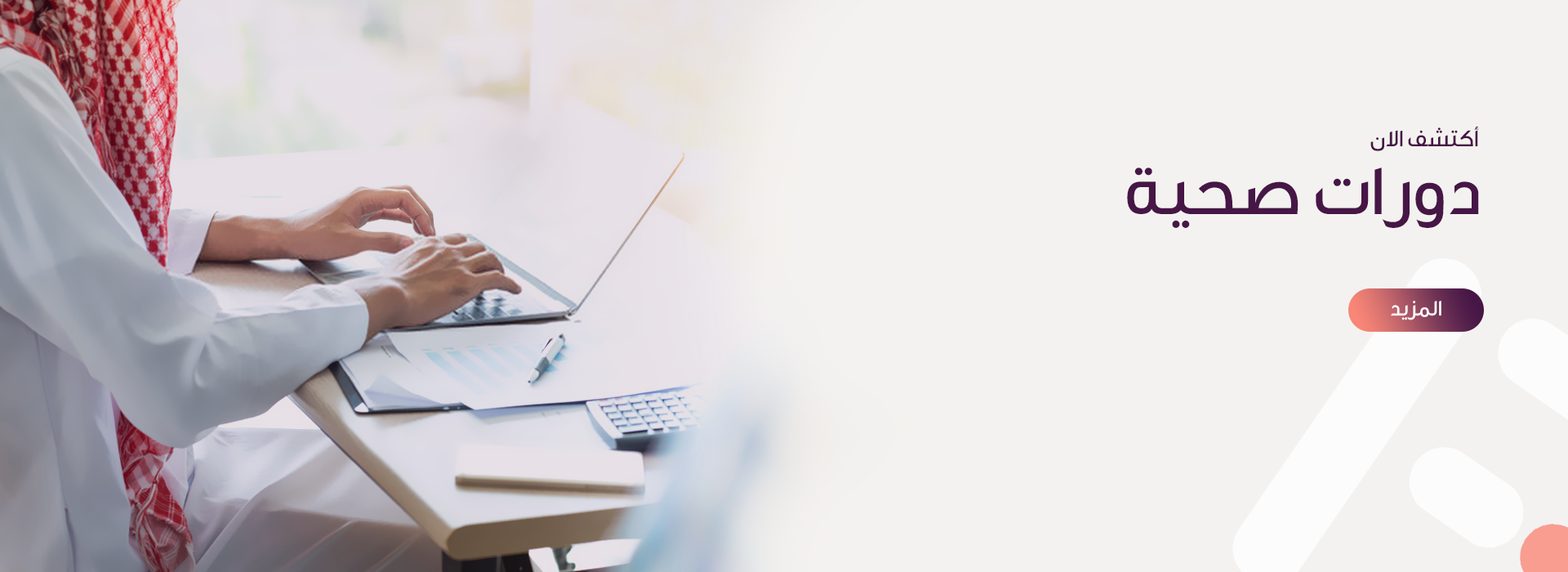
<style>
.page{position:relative;width:1568px;height:572px;background:#f4f2f0}
.page>*{position:absolute;margin:0}
.t1{font:24.5px "GEDinarOne-Medium";color:#461646;text-transform:uppercase}
.t2{font:72.1px "GEDinarOne-Medium";color:#461646;text-transform:uppercase}
.t3{font:22.6px "GEDinarOne-Medium";color:#ffffff;text-transform:uppercase;scale:0.92 1}
</style>
<div class="page">
<p class="t1" style="left:1370px;top:126px;width:109px;height:25px">أكتشف الان</p>
<p class="t2" style="left:1127px;top:167px;width:352px;height:61px">دورات صحية</p>
<p class="t3" style="left:1391px;top:301px;width:50px;height:19px">المزيد</p>
</div>
